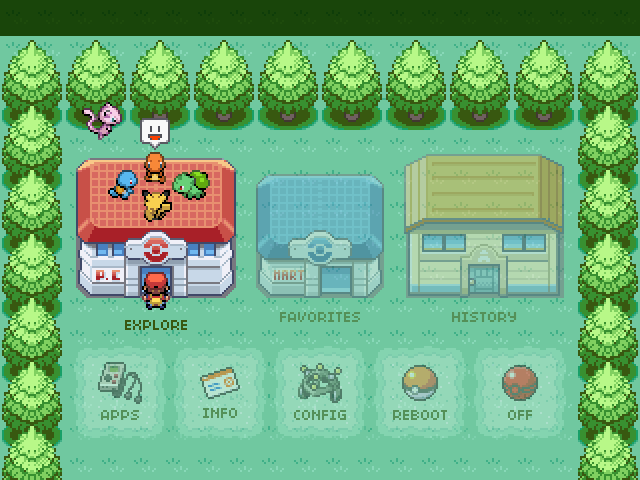
<style>
.page{position:relative;width:640px;height:480px;background:#70c8a0}
.page>*{position:absolute;margin:0}
.t1{font:16px "04b03";color:#549058}
.t2{font:16px "04b03";color:#385810}
</style>
<div class="page">
<p class="t1" style="left:280px;top:312px;width:80px;height:10px">FAVORITES</p>
<p class="t1" style="left:452px;top:312px;width:65px;height:10px">HISTORY</p>
<p class="t2" style="left:125px;top:320px;width:62px;height:10px">EXPLORE</p>
<p class="t1" style="left:101px;top:410px;width:38px;height:10px">APPS</p>
<p class="t1" style="left:203px;top:408px;width:34px;height:10px">INFO</p>
<p class="t1" style="left:294px;top:410px;width:52px;height:10px">CONFIG</p>
<p class="t1" style="left:393px;top:410px;width:54px;height:10px">REBOOT</p>
<p class="t1" style="left:508px;top:410px;width:24px;height:10px">OFF</p>
</div>
